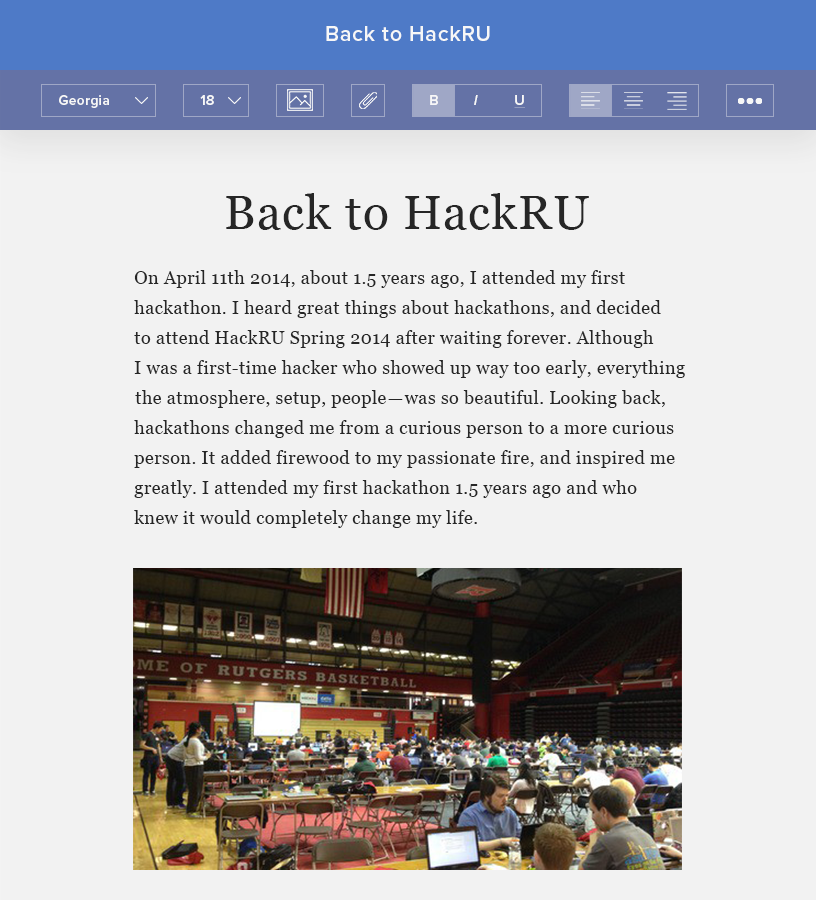
<style>
.page{position:relative;width:816px;height:900px;background:#f2f2f2}
.page>*{position:absolute;margin:0}
.t1{font:22px "ProximaNova-Semibold";letter-spacing:0.025em;color:#f7f7f7}
.t2{font:14px "ProximaNova-Semibold";letter-spacing:0.025em;color:#f7f7f7}
.t3{font:14px "ProximaNova-SemiboldIt";letter-spacing:0.025em;color:#f7f7f7}
.t4{font:14px "ProximaNova-Semibold";letter-spacing:0.025em;color:#f7f7f7;text-decoration:underline}
.t5{font:48px "Georgia";letter-spacing:0.025em;color:#262626}
.t6{font:18px/30px "Georgia";letter-spacing:0.025em;color:#262626}
</style>
<div class="page">
<p class="t1" style="left:326px;top:26px;width:164px;height:15px">Back to HackRU</p>
<p class="t2" style="left:59px;top:95px;width:50px;height:13px">Georgia</p>
<p class="t2" style="left:200px;top:95px;width:14px;height:10px">18</p>
<p class="t2" style="left:430px;top:95px;width:8px;height:10px">B</p>
<p class="t3" style="left:474px;top:95px;width:4px;height:10px">I</p>
<p class="t4" style="left:514px;top:95px;width:11px;height:13px">U</p>
<p class="t5" style="left:226px;top:193px;width:363px;height:37px">Back to HackRU</p>
<p class="t6" style="left:134px;top:270px;width:551px;height:258px">On April 11th 2014, about 1.5 years ago, I attended my first<br>hackathon. I heard great things about hackathons, and decided<br>to attend HackRU Spring 2014 after waiting forever. Although<br>I was a first-time hacker who showed up way too early, everything <br> the atmosphere, setup, people — was so beautiful. Looking back, <br>hackathons changed me from a curious person to a more curious <br>person. It added firewood to my passionate fire, and inspired me <br>greatly. I attended my first hackathon 1.5 years ago and who <br>knew it would completely change my life.</p>
</div>
